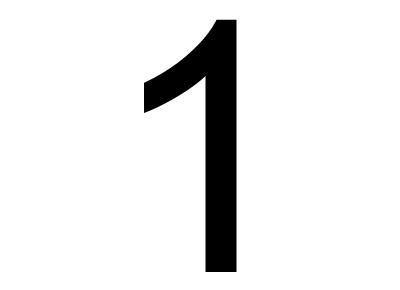
<style>
.page{position:relative;width:400px;height:290px;background:#ffffff}
.page>*{position:absolute;margin:0}
.t1{font:350px "ArialMT";color:#000000}
</style>
<div class="page">
<p class="t1" style="left:144px;top:19px;width:93px;height:253px">1</p>
</div>
